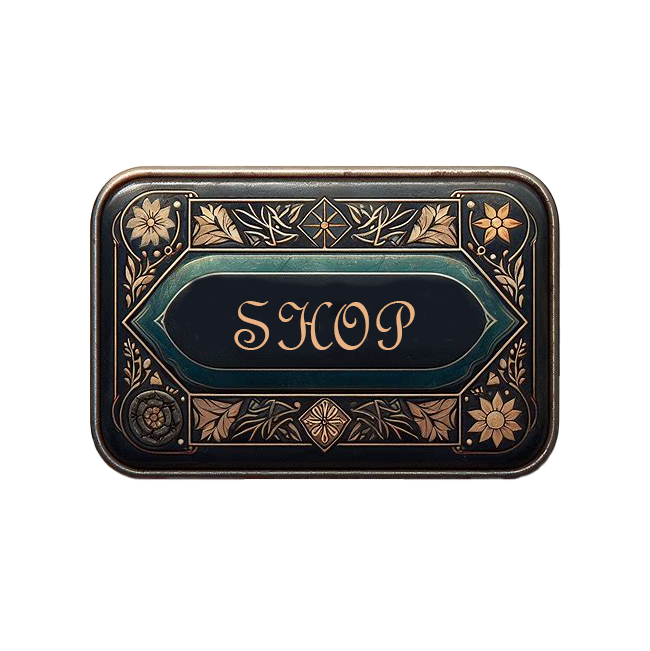
<style>
.page{position:relative;width:650px;height:651px;background:#ffffff}
.page>*{position:absolute;margin:0}
.t1{font:72px "FrenchScriptMT";color:#e8b284;text-transform:uppercase}
</style>
<div class="page">
<p class="t1" style="left:234px;top:301px;width:181px;height:49px">SHOP</p>
</div>
